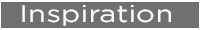
<style>
.page{position:relative;width:200px;height:30px;background:#707070}
.page>*{position:absolute;margin:0}
.t1{font:23.8px "Gotham-Book";letter-spacing:0.01em;color:#fefefe;scale:1.22 1}
</style>
<div class="page">
<p class="t1" style="left:22px;top:5px;width:149px;height:21px">Inspiration</p>
</div>
